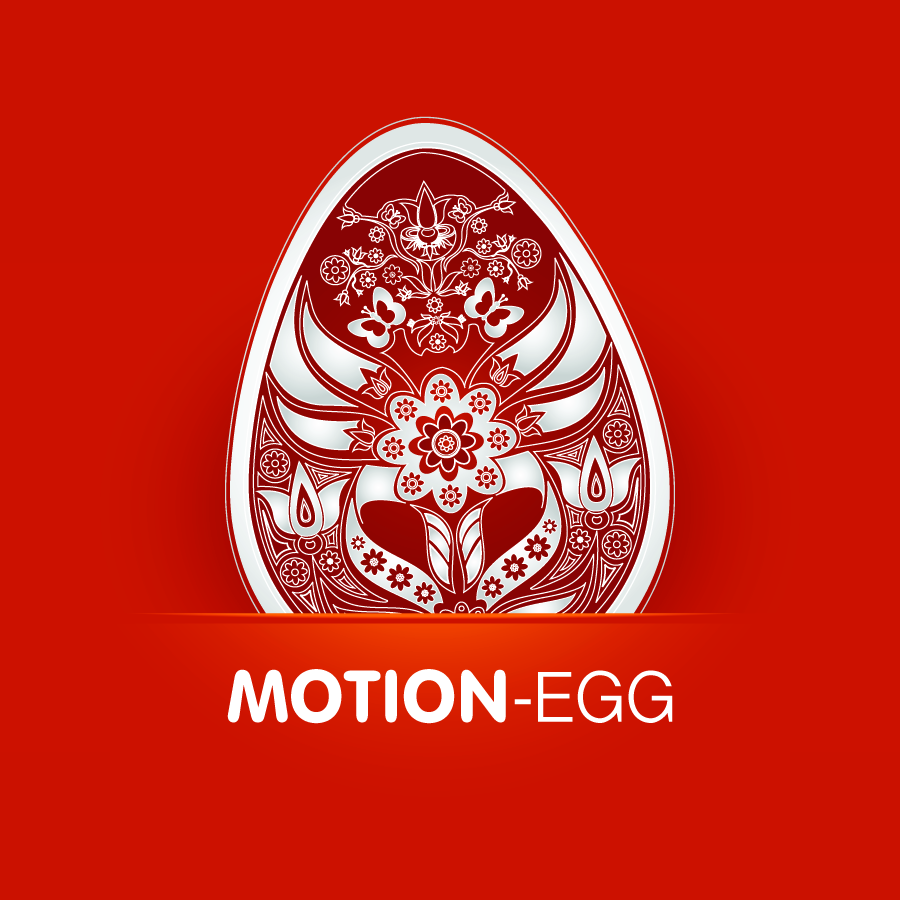
<style>
.page{position:relative;width:900px;height:900px;background:#cb1100}
.page>*{position:absolute;margin:0}
.t1{font:72px "SansRoundedC";color:#ffffff;text-transform:uppercase}
.t2{font:72px "TamilSangamMN";color:#ffffff;text-transform:uppercase}
</style>
<div class="page">
<p class="t1" style="left:227px;top:669px;width:446px;height:55px">Motion<span class="t2">-Egg</span></p>
</div>
